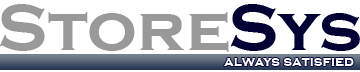
<style>
.page{position:relative;width:360px;height:72px;background:#ffffff}
.page>*{position:absolute;margin:0}
.t1{font:66.5px "CopperplateGothic-Bold";color:#999999;scale:1.05 1}
.t2{font:66.5px "CopperplateGothic-Bold";color:#000033;scale:1.05 1}
.t3{font:14px "CopperplateGothic-Bold";color:#ffffff}
</style>
<div class="page">
<p class="t1" style="left:0px;top:4px;width:229px;height:48px">Store</p>
<p class="t2" style="left:230px;top:4px;width:130px;height:47px">Sys</p>
<p class="t3" style="left:224px;top:58px;width:130px;height:8px">always satisfied</p>
</div>
